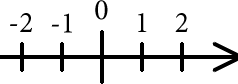
<style>
.page{position:relative;width:238px;height:84px;background:#ffffff}
.page>*{position:absolute;margin:0}
.t1{font:30px "MinionPro-Regular";color:#000000}
</style>
<div class="page">
<p class="t1" style="left:95px;top:0px;width:13px;height:20px">0</p>
<p class="t1" style="left:10px;top:13px;width:22px;height:19px">-2</p>
<p class="t1" style="left:51px;top:13px;width:21px;height:20px">-1</p>
<p class="t1" style="left:138px;top:13px;width:9px;height:19px">1</p>
<p class="t1" style="left:175px;top:13px;width:13px;height:19px">2</p>
</div>
